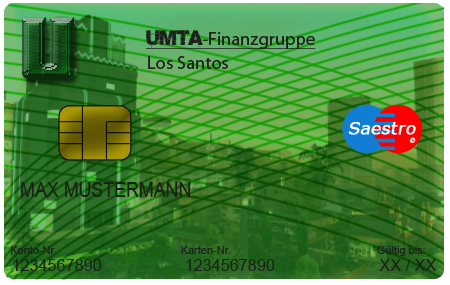
<style>
.page{position:relative;width:450px;height:285px}
.page>*{position:absolute;margin:0}
.t1{font:18.4px "MyriadPro-Regular";color:#1c201b;text-decoration:underline}
.t2{font:18.4px "Base05";color:#1c201b;text-decoration:underline}
.t3{font:18.4px "MyriadPro-Regular";color:#1c201b}
.t4{font:16.9px "Verdana";color:#ffffff;font-weight:bold;font-style:italic}
.t5{font:5.7px "Verdana";font-weight:bold;font-style:italic}
.t6{font:20.9px "ArialMT";color:#1c201b;scale:0.85 1}
.t7{font:11px "ArialMT";color:#1c201b}
.t8{font:16.2px "ArialMT";color:#1c201b}
</style>
<div class="page">
<p class="t1" style="left:146px;top:30px;width:170px;height:20px"><span class="t2">Umta</span>-Finanzgruppe</p>
<p class="t3" style="left:148px;top:56px;width:80px;height:13px">Los Santos</p>
<p class="t4" style="left:348px;top:122px;width:68px;height:13px">Saestro</p>
<p class="t5" style="left:409px;top:137px;width:7px;height:6px">©</p>
<p class="t6" style="left:21px;top:182px;width:170px;height:15px">MAX MUSTERMANN</p>
<p class="t7" style="left:11px;top:246px;width:46px;height:8px">Konto-Nr.</p>
<p class="t7" style="left:181px;top:246px;width:50px;height:8px">Karten-Nr.</p>
<p class="t7" style="left:377px;top:246px;width:48px;height:10px">Gültig bis:</p>
<p class="t8" style="left:13px;top:259px;width:88px;height:12px">1234567890</p>
<p class="t8" style="left:186px;top:259px;width:89px;height:12px">1234567890</p>
<p class="t8" style="left:379px;top:259px;width:57px;height:12px">XX / XX</p>
</div>
